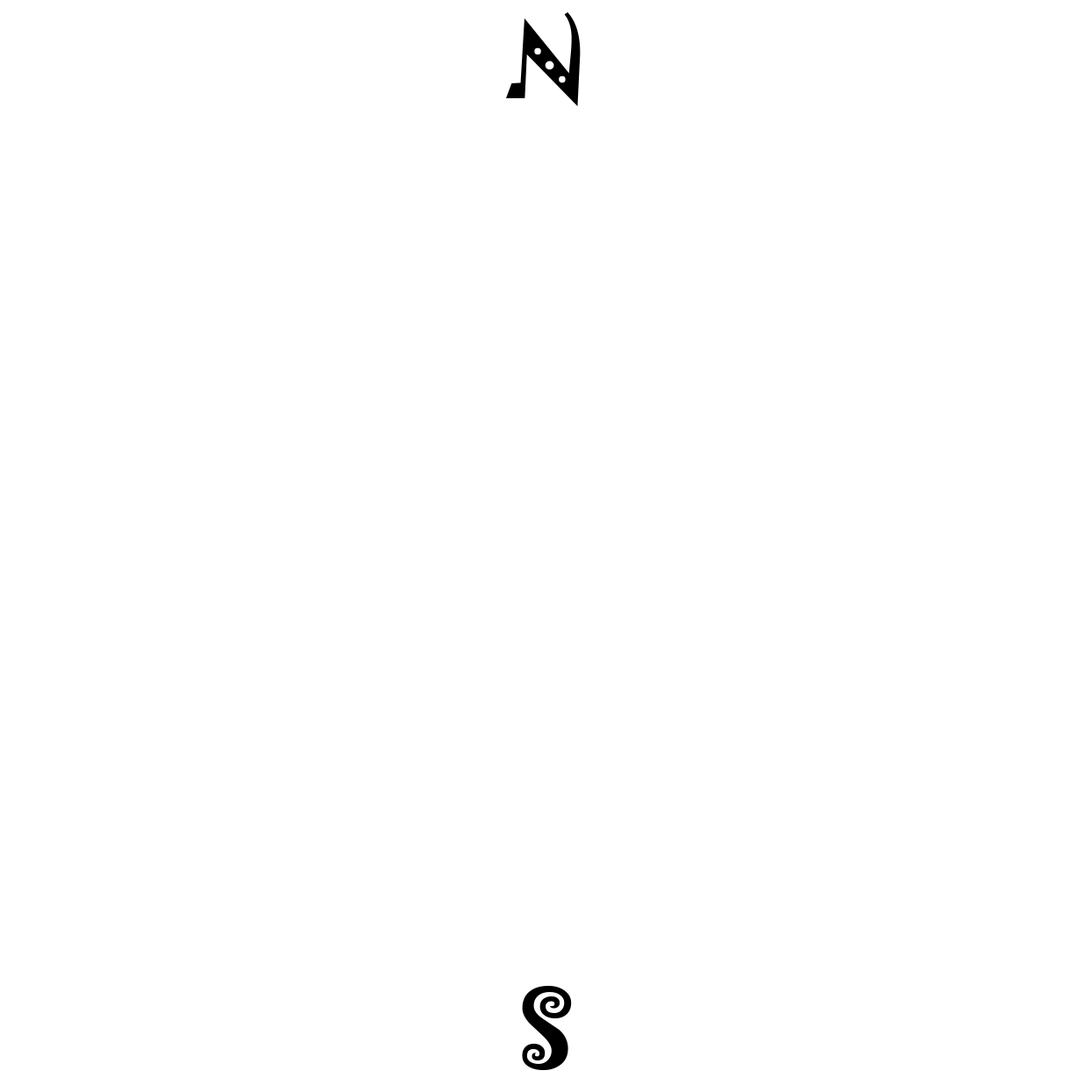
<style>
.page{position:relative;width:1092px;height:1092px;background:#ffffff}
.page>*{position:absolute;margin:0}
.t1{font:94.7px "Jokerman-Regular";color:#000000}
</style>
<div class="page">
<p class="t1" style="left:506px;top:12px;width:75px;height:94px">N</p>
<p class="t1" style="left:522px;top:986px;width:50px;height:84px">S</p>
</div>
